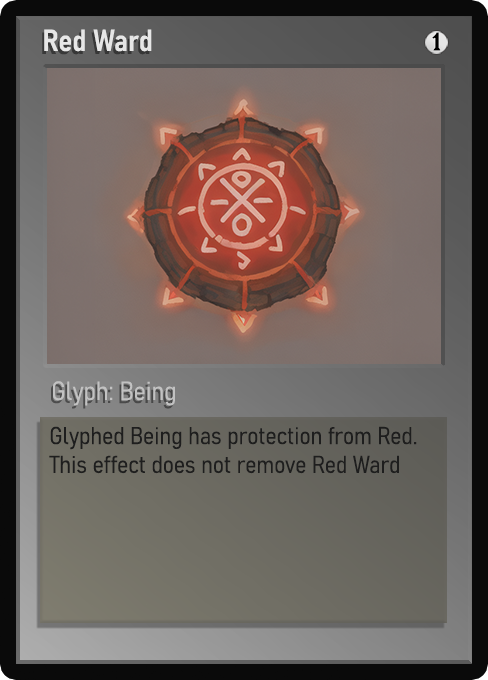
<style>
.page{position:relative;width:488px;height:680px}
.page>*{position:absolute;margin:0}
.t1{font:30px "Bahnschrift-SemiBoldSemiCondensed";color:#f2f2f2;font-weight:bold}
.t2{font:25px "WTRRoycroft";color:#000000;font-weight:bold;scale:1.09 1}
.t3{font:26px "Bahnschrift-LightSemiCondensed";color:#c8c8c8;font-weight:bold}
.t4{font:24px "Bahnschrift-LightSemiCondensed";color:#1e1e1e;font-weight:bold}
</style>
<div class="page">
<p class="t1" style="left:44px;top:29px;width:108px;height:23px;opacity:0.9">Red Ward</p>
<p class="t2" style="left:432px;top:32px;width:9px;height:19px">1</p>
<p class="t3" style="left:53px;top:381px;width:122px;height:25px;opacity:0.9">Glyph: Being</p>
<p class="t4" style="left:49px;top:426px;width:368px;height:48px">Glyphed Being has protection from Red. This effect does not remove Red Ward</p>
</div>
